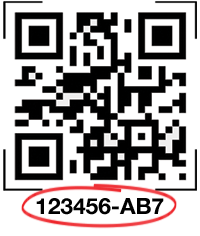
<style>
.page{position:relative;width:200px;height:236px;background:#ffffff}
.page>*{position:absolute;margin:0}
.t1{font:22.2px "HelveticaNeue-Bold";color:#000000}
</style>
<div class="page">
<p class="t1" style="left:36px;top:198px;width:128px;height:17px">123456-AB7</p>
</div>
